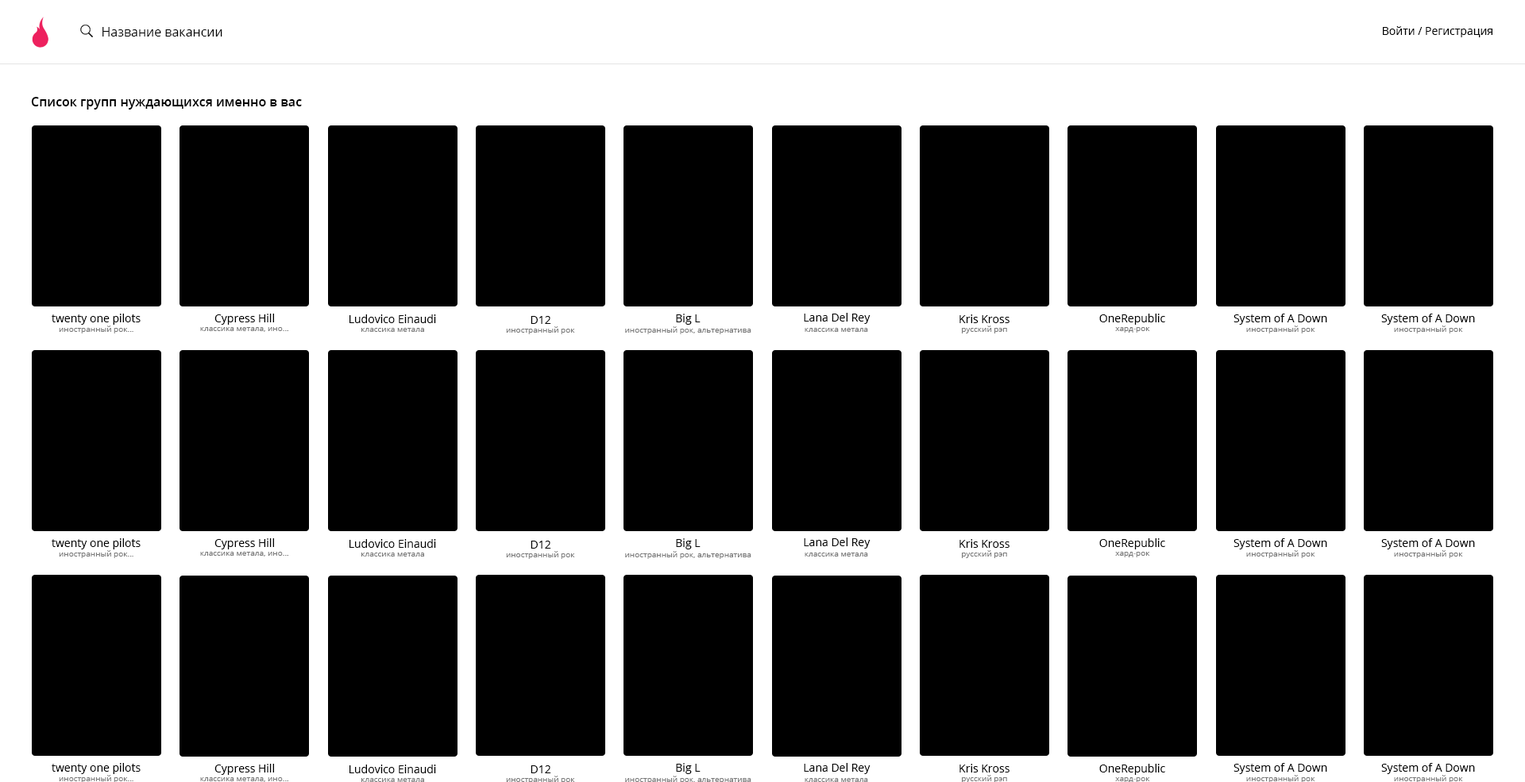
<style>
.page{position:relative;width:1525px;height:782px;background:#000000}
.page>*{position:absolute;margin:0}
.t1{font:12.7px "OpenSans";color:#000000}
.t2{font:11.1px "OpenSans";color:#000000}
.t3{font:12.7px "OpenSans-Semibold";color:#000000}
.t4{font:7.9px "OpenSans";color:#777777}
</style>
<div class="page">
<p class="t1" style="left:102px;top:27px;width:120px;height:10px">Название вакансии</p>
<p class="t2" style="left:1382px;top:26px;width:110px;height:11px">Войти / Регистрация</p>
<p class="t3" style="left:31px;top:97px;width:271px;height:13px">Список групп нуждающихся именно в вас</p>
<p class="t2" style="left:52px;top:314px;width:89px;height:11px">twenty one pilots</p>
<p class="t2" style="left:214px;top:314px;width:60px;height:11px">Cypress Hill</p>
<p class="t2" style="left:349px;top:314px;width:87px;height:9px">Ludovico Einaudi</p>
<p class="t2" style="left:530px;top:316px;width:21px;height:8px">D12</p>
<p class="t2" style="left:676px;top:314px;width:24px;height:11px">Big L</p>
<p class="t2" style="left:804px;top:313px;width:66px;height:11px">Lana Del Rey</p>
<p class="t2" style="left:959px;top:314px;width:50px;height:9px">Kris Kross</p>
<p class="t2" style="left:1099px;top:314px;width:66px;height:11px">OneRepublic</p>
<p class="t2" style="left:1233px;top:314px;width:94px;height:11px">System of A Down</p>
<p class="t2" style="left:1381px;top:314px;width:94px;height:11px">System of A Down</p>
<p class="t4" style="left:59px;top:326px;width:74px;height:8px">иностранный рок...</p>
<p class="t4" style="left:200px;top:327px;width:88px;height:5px">классика метала, ино...</p>
<p class="t4" style="left:361px;top:328px;width:63px;height:4px">классика метала</p>
<p class="t4" style="left:506px;top:326px;width:69px;height:8px">иностранный рок</p>
<p class="t4" style="left:625px;top:326px;width:126px;height:8px">иностранный рок, альтернатива</p>
<p class="t4" style="left:804px;top:328px;width:64px;height:4px">классика метала</p>
<p class="t4" style="left:962px;top:326px;width:45px;height:8px">русский рэп</p>
<p class="t4" style="left:1115px;top:327px;width:35px;height:6px">хард-рок</p>
<p class="t4" style="left:1246px;top:326px;width:69px;height:8px">иностранный рок</p>
<p class="t4" style="left:1394px;top:326px;width:69px;height:8px">иностранный рок</p>
<p class="t2" style="left:52px;top:538px;width:89px;height:11px">twenty one pilots</p>
<p class="t2" style="left:214px;top:538px;width:60px;height:11px">Cypress Hill</p>
<p class="t2" style="left:349px;top:539px;width:87px;height:9px">Ludovico Einaudi</p>
<p class="t2" style="left:530px;top:541px;width:21px;height:8px">D12</p>
<p class="t2" style="left:676px;top:538px;width:24px;height:11px">Big L</p>
<p class="t2" style="left:804px;top:538px;width:66px;height:11px">Lana Del Rey</p>
<p class="t2" style="left:959px;top:539px;width:50px;height:9px">Kris Kross</p>
<p class="t2" style="left:1099px;top:538px;width:66px;height:11px">OneRepublic</p>
<p class="t2" style="left:1233px;top:538px;width:94px;height:11px">System of A Down</p>
<p class="t2" style="left:1381px;top:538px;width:94px;height:11px">System of A Down</p>
<p class="t4" style="left:59px;top:550px;width:74px;height:8px">иностранный рок...</p>
<p class="t4" style="left:200px;top:552px;width:88px;height:5px">классика метала, ино...</p>
<p class="t4" style="left:361px;top:553px;width:63px;height:4px">классика метала</p>
<p class="t4" style="left:506px;top:551px;width:69px;height:8px">иностранный рок</p>
<p class="t4" style="left:625px;top:551px;width:126px;height:8px">иностранный рок, альтернатива</p>
<p class="t4" style="left:804px;top:553px;width:64px;height:4px">классика метала</p>
<p class="t4" style="left:962px;top:550px;width:45px;height:8px">русский рэп</p>
<p class="t4" style="left:1115px;top:552px;width:35px;height:5px">хард-рок</p>
<p class="t4" style="left:1246px;top:550px;width:69px;height:8px">иностранный рок</p>
<p class="t4" style="left:1394px;top:550px;width:69px;height:8px">иностранный рок</p>
<p class="t2" style="left:52px;top:763px;width:89px;height:11px">twenty one pilots</p>
<p class="t2" style="left:214px;top:764px;width:60px;height:11px">Cypress Hill</p>
<p class="t2" style="left:349px;top:765px;width:87px;height:8px">Ludovico Einaudi</p>
<p class="t2" style="left:530px;top:765px;width:21px;height:8px">D12</p>
<p class="t2" style="left:676px;top:763px;width:24px;height:11px">Big L</p>
<p class="t2" style="left:804px;top:763px;width:66px;height:11px">Lana Del Rey</p>
<p class="t2" style="left:959px;top:764px;width:50px;height:9px">Kris Kross</p>
<p class="t2" style="left:1099px;top:764px;width:66px;height:11px">OneRepublic</p>
<p class="t2" style="left:1233px;top:763px;width:94px;height:11px">System of A Down</p>
<p class="t2" style="left:1381px;top:763px;width:94px;height:11px">System of A Down</p>
<p class="t4" style="left:59px;top:775px;width:74px;height:8px">иностранный рок...</p>
<p class="t4" style="left:200px;top:777px;width:88px;height:5px">классика метала, ино...</p>
<p class="t4" style="left:361px;top:778px;width:63px;height:4px">классика метала</p>
<p class="t4" style="left:506px;top:776px;width:69px;height:8px">иностранный рок</p>
<p class="t4" style="left:625px;top:776px;width:126px;height:8px">иностранный рок, альтернатива</p>
<p class="t4" style="left:804px;top:778px;width:64px;height:4px">классика метала</p>
<p class="t4" style="left:962px;top:775px;width:45px;height:8px">русский рэп</p>
<p class="t4" style="left:1115px;top:777px;width:35px;height:6px">хард-рок</p>
<p class="t4" style="left:1246px;top:775px;width:69px;height:8px">иностранный рок</p>
<p class="t4" style="left:1394px;top:775px;width:69px;height:8px">иностранный рок</p>
</div>
